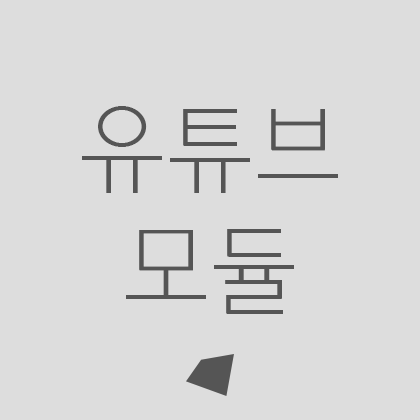
<style>
.page{position:relative;width:420px;height:420px;background:#dddddd}
.page>*{position:absolute;margin:0}
.t1{font:100px "YDotum110";color:#555555}
</style>
<div class="page">
<p class="t1" style="left:82px;top:106px;width:256px;height:208px;text-align:center">유튜브<br>모듈</p>
</div>
